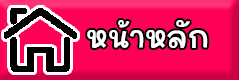
<style>
.page{position:relative;width:239px;height:80px;background:#ff0054}
.page>*{position:absolute;margin:0}
.t1{font:36px "MNDANGO-Regular";color:#ffffff}
</style>
<div class="page">
<p class="t1" style="left:87px;top:20px;width:121px;height:28px">หน้าหลัก</p>
</div>
